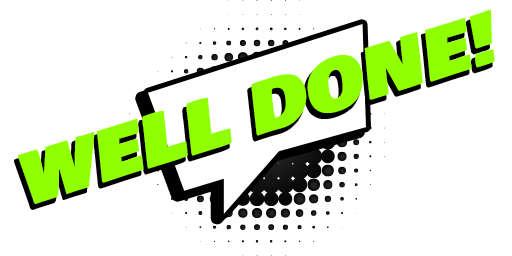
<style>
.page{position:relative;width:512px;height:256px;background:#ffffff}
.page>*{position:absolute;margin:0}
.t1{font:69.7px "BowlbyOneSC-Regular";color:#90ff00;scale:1.07 1}
</style>
<div class="page">
<p class="t1" style="left:18px;top:10px;width:477px;height:194px;rotate:-17deg">WELL DONE!</p>
</div>
